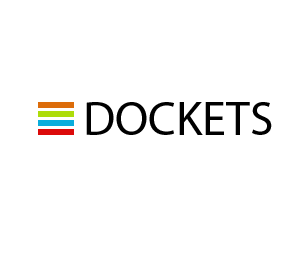
<style>
.page{position:relative;width:300px;height:255px;background:#ffffff}
.page>*{position:absolute;margin:0}
.t1{font:48px "MyriadPro-Regular";color:#000000}
</style>
<div class="page">
<p class="t1" style="left:86px;top:102px;width:186px;height:33px">DOCKETS</p>
</div>
